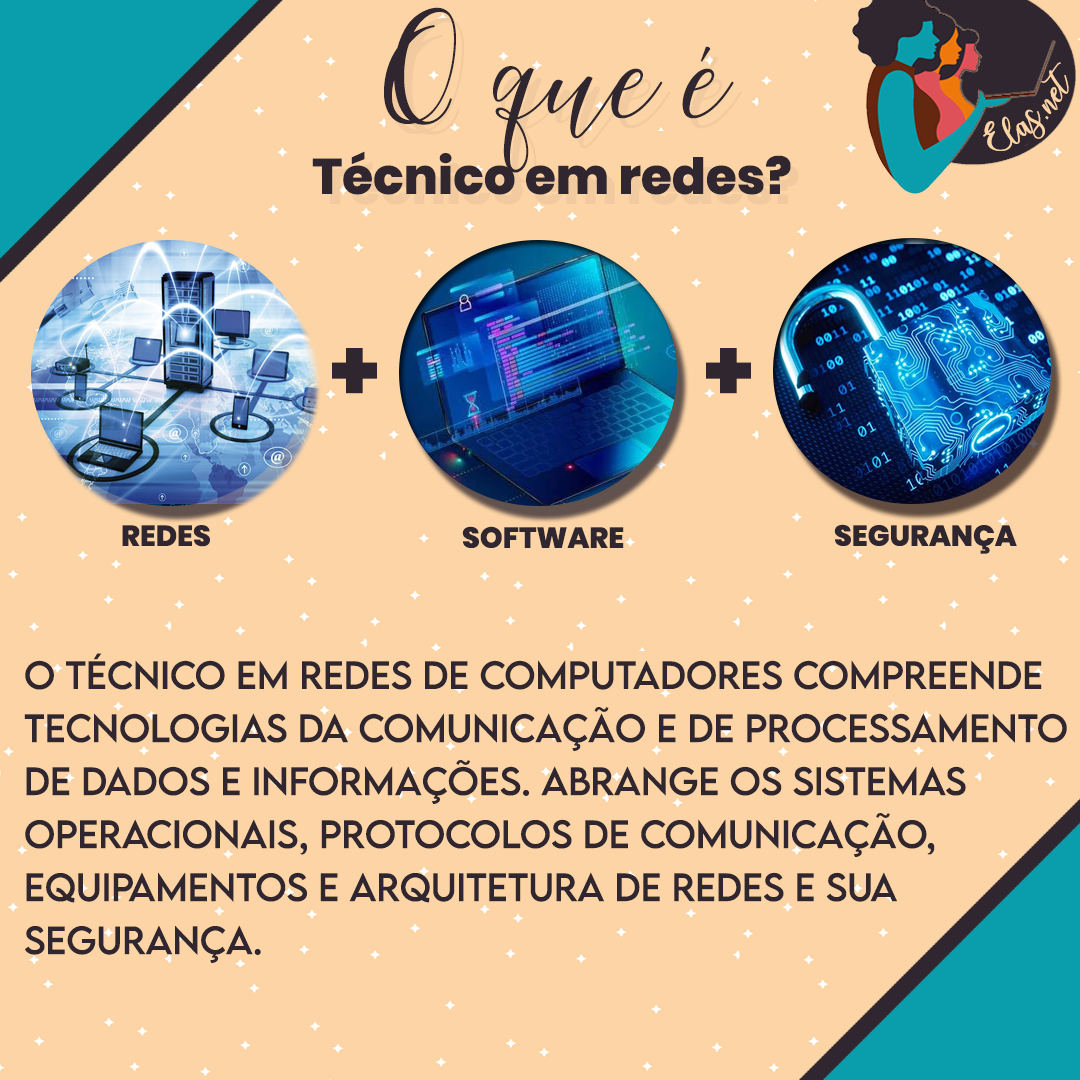
<style>
.page{position:relative;width:1080px;height:1080px;background:#fcd4a5}
.page>*{position:absolute;margin:0}
.t1{font:50px "Poppins-ExtraBold";color:#2f262f}
.t2{font:172.1px "MaheisaScript";color:#2f262f}
.t3{font:25px "charlinda-Regular";color:#fcd4a5;scale:1.18 1}
.t4{font:88px "Poppins-ExtraBold";color:#2f262f}
.t5{font:29px "Poppins-ExtraBold";color:#2f262f}
.t6{font:35px/53px "LEMONMILK-Regular";color:#2f262f}
</style>
<div class="page">
<p class="t1" style="left:312px;top:7px;width:479px;height:188px;text-align:center"><span class="t2">O que é<br></span>Técnico em redes?</p>
<p class="t3" style="left:983px;top:62px;width:86px;height:89px;rotate:-43deg">Elas.net</p>
<p class="t4" style="left:332px;top:348px;width:45px;height:46px">+</p>
<p class="t4" style="left:706px;top:348px;width:45px;height:46px">+</p>
<p class="t5" style="left:122px;top:525px;width:88px;height:22px">REDES</p>
<p class="t5" style="left:462px;top:526px;width:162px;height:22px">SOFTWARE</p>
<p class="t5" style="left:834px;top:524px;width:183px;height:30px">SEGURANÇA</p>
<p class="t6" style="left:24px;top:653px;width:1043px;height:310px">O técnico em redes de computadores compreende <br>tecnologias da comunicação e de processamento<br>de dados e informações. Abrange os sistemas <br>operacionais, protocolos de comunicação, <br>equipamentos e arquitetura de redes e sua <br>segurança.</p>
</div>
